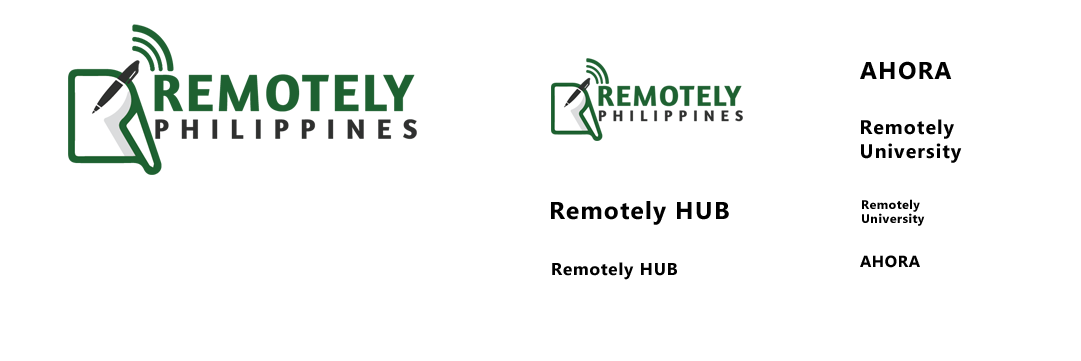
<style>
.page{position:relative;width:1081px;height:361px;background:#ffffff}
.page>*{position:absolute;margin:0}
.t1{font:24.3px "MicrosoftTaiLe-Bold";letter-spacing:0.05em;color:#000000}
.t2{font:19.6px "MicrosoftTaiLe-Bold";letter-spacing:0.05em;color:#000000}
.t3{font:12.2px "MicrosoftTaiLe-Bold";letter-spacing:0.05em;color:#000000}
.t4{font:15.9px "MicrosoftTaiLe-Bold";letter-spacing:0.05em;color:#000000}
.t5{font:17.1px "MicrosoftTaiLe-Bold";letter-spacing:0.05em;color:#000000}
</style>
<div class="page">
<p class="t1" style="left:860px;top:61px;width:92px;height:19px">AHORA</p>
<p class="t2" style="left:861px;top:119px;width:101px;height:44px">Remotely<br>University</p>
<p class="t1" style="left:551px;top:201px;width:178px;height:24px">Remotely HUB</p>
<p class="t3" style="left:862px;top:199px;width:63px;height:27px">Remotely<br>University</p>
<p class="t4" style="left:860px;top:255px;width:60px;height:13px">AHORA</p>
<p class="t5" style="left:552px;top:262px;width:125px;height:18px">Remotely HUB</p>
</div>
